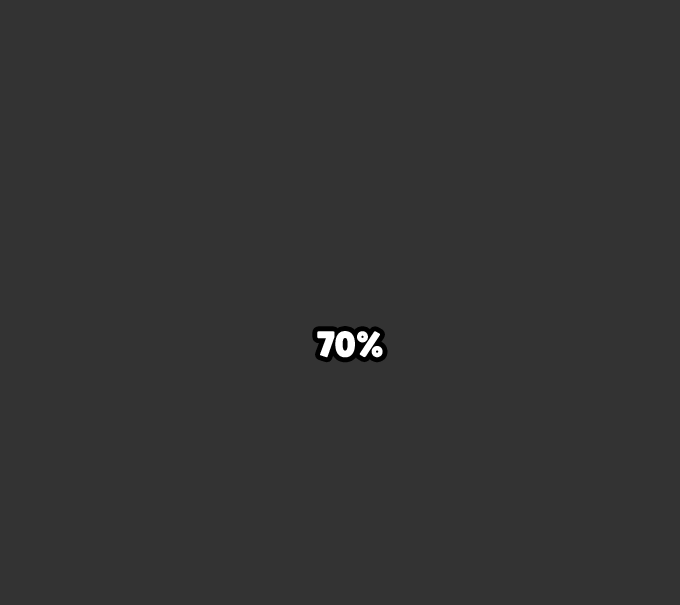
<style>
.page{position:relative;width:680px;height:605px;background:#333333}
.page>*{position:absolute;margin:0}
.t1{font:35px "CookieRunOTF-Black";color:#ffffff;text-transform:uppercase}
</style>
<div class="page">
<p class="t1" style="left:317px;top:331px;width:66px;height:27px">70%</p>
</div>
